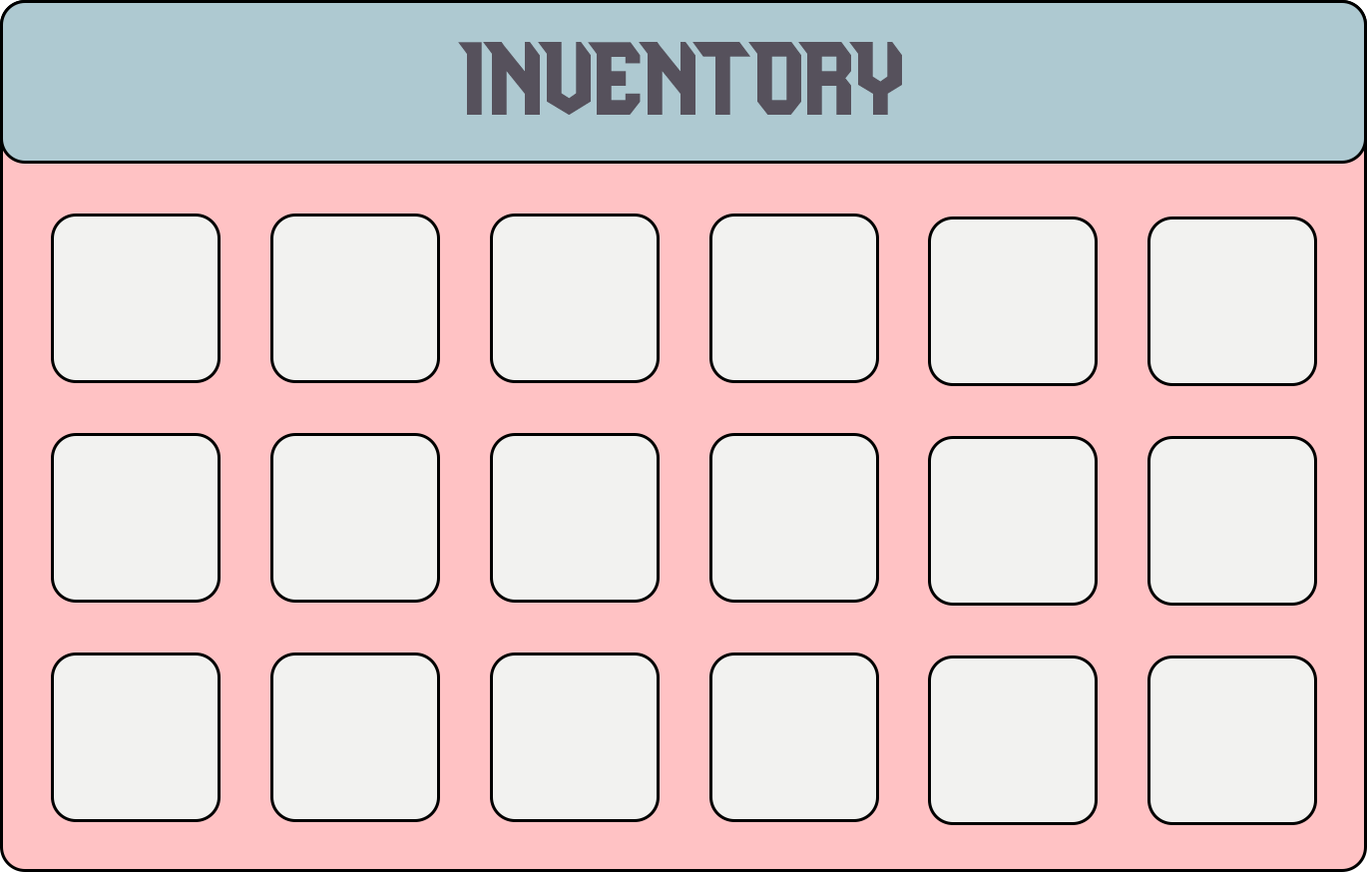
<style>
.page{position:relative;width:1367px;height:872px;background:#ffc2c4}
.page>*{position:absolute;margin:0}
.t1{font:103.8px "BigSpace";color:#56515c}
</style>
<div class="page">
<p class="t1" style="left:458px;top:42px;width:444px;height:73px">INVENTORY</p>
</div>
